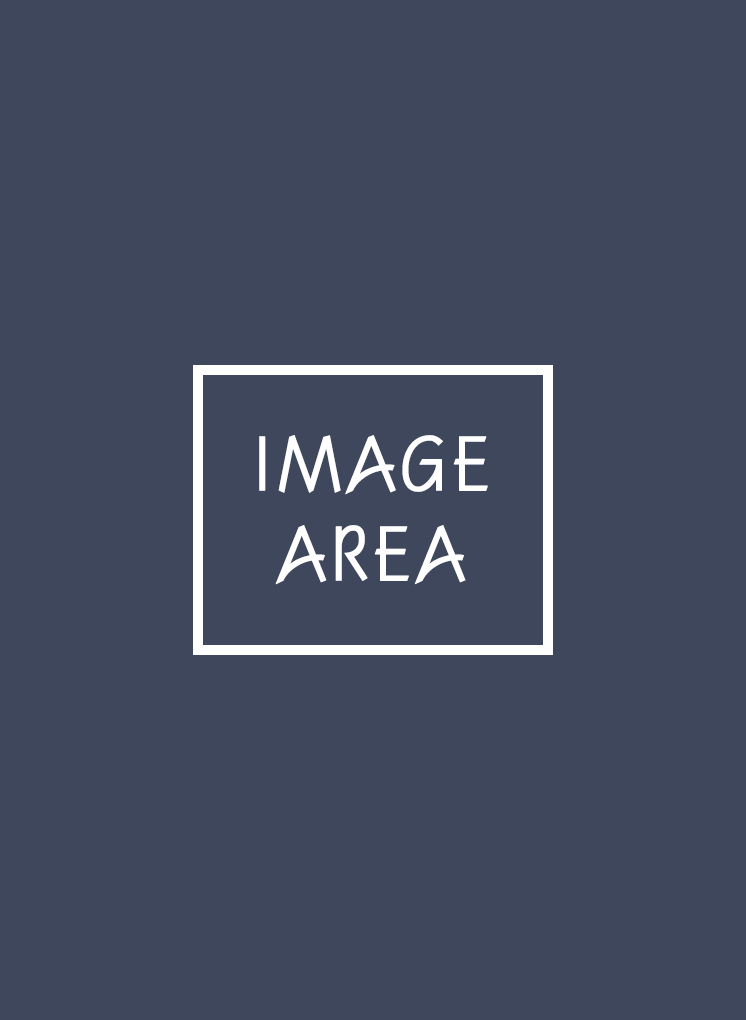
<style>
.page{position:relative;width:746px;height:1020px;background:#3e475c}
.page>*{position:absolute;margin:0}
.t1{font:75px "H2porL";letter-spacing:-0.02em;color:#ffffff;text-transform:uppercase;font-weight:bold}
</style>
<div class="page">
<p class="t1" style="left:259px;top:435px;width:229px;height:150px;text-align:center">image<br>area</p>
</div>
